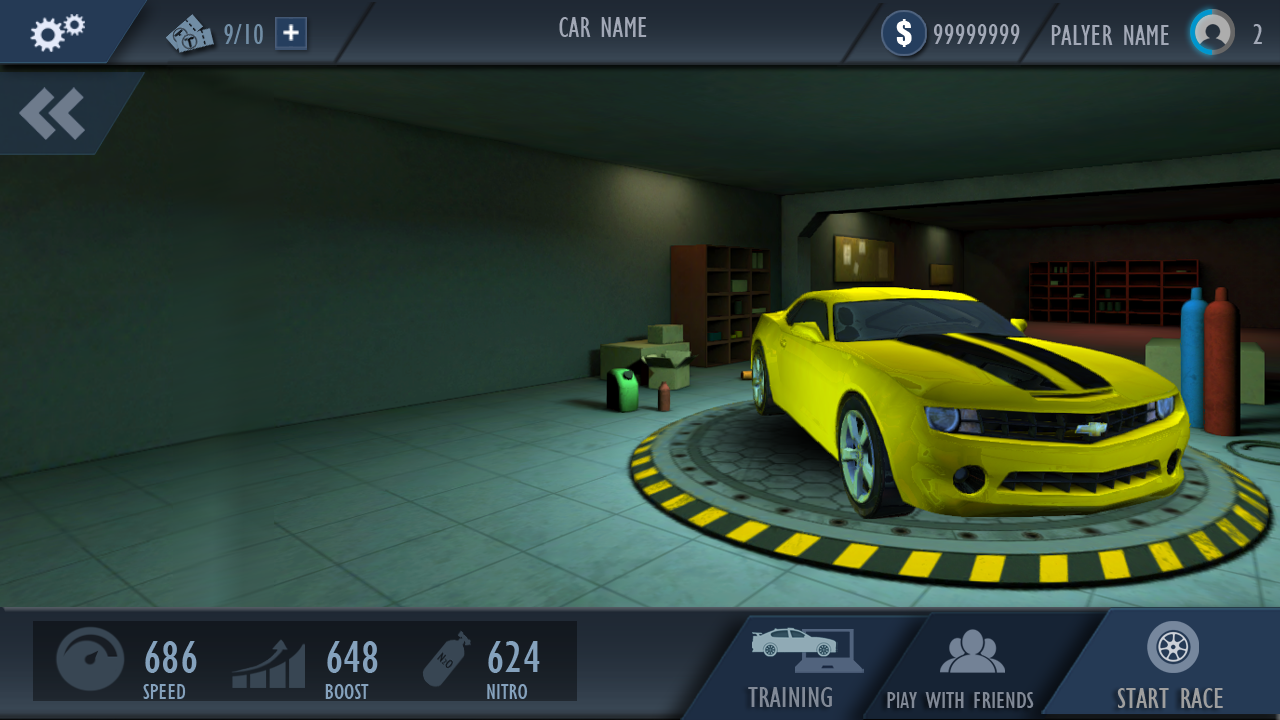
<style>
.page{position:relative;width:1280px;height:720px}
.page>*{position:absolute;margin:0}
.t1{font:22.6px "GillSansMT-Condensed";color:#85a2bd;scale:1.06 1}
.t2{font:47px "GillSansMT-Condensed";color:#85a2bd;scale:1.06 1}
.t3{font:30px "GillSansMT-Condensed";color:#818996;scale:1.06 1}
.t4{font:30px "GillSansMT-Condensed";color:#9e9e9e;scale:1.06 1}
.t5{font:24px "GillSansMT-Condensed";color:#818996;scale:1.06 1}
</style>
<div class="page">
<p class="t1" style="left:143px;top:641px;width:54px;height:58px"><span class="t2">686<br></span>SPEED</p>
<p class="t1" style="left:325px;top:641px;width:53px;height:58px"><span class="t2">648<br></span>BOOST</p>
<p class="t1" style="left:487px;top:641px;width:53px;height:58px"><span class="t2">624<br></span>NITRO</p>
<p class="t3" style="left:748px;top:687px;width:84px;height:20px">TRAINING</p>
<p class="t4" style="left:1117px;top:688px;width:106px;height:20px">START RACE</p>
<p class="t5" style="left:887px;top:692px;width:147px;height:16px">PlAY WITH FRIENDS</p>
</div>
